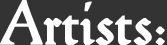
<style>
.page{position:relative;width:167px;height:45px;background:#333333}
.page>*{position:absolute;margin:0}
.t1{font:62.5px "Hamlet-Tertia18";color:#ffffff;font-weight:bold}
</style>
<div class="page">
<p class="t1" style="left:0px;top:0px;width:165px;height:46px">Artists:</p>
</div>
